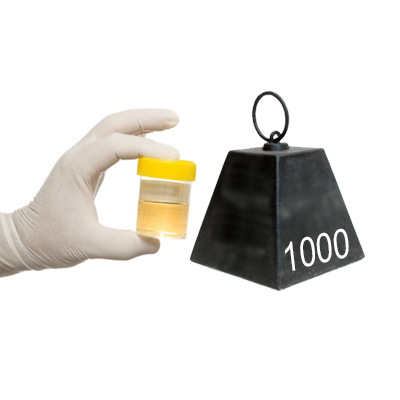
<style>
.page{position:relative;width:400px;height:400px;background:#ffffff}
.page>*{position:absolute;margin:0}
.t1{font:40.5px "ArialMT";color:#fdfcfc;scale:0.77 1}
</style>
<div class="page">
<p class="t1" style="left:284px;top:228px;width:65px;height:43px;rotate:-14deg">1000</p>
</div>
